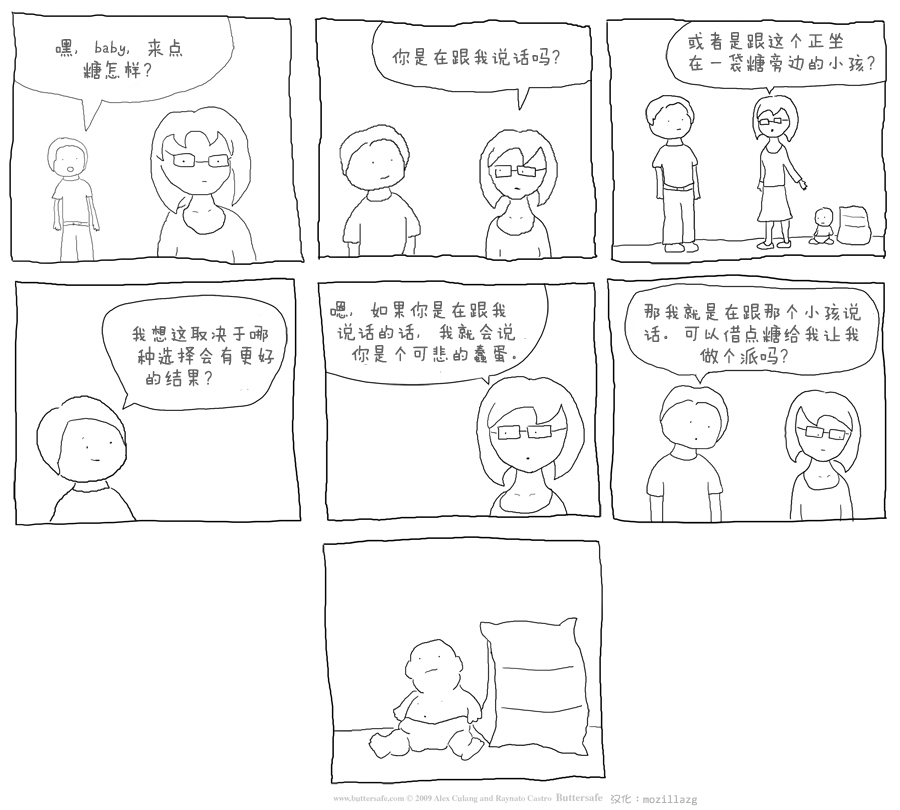
<style>
.page{position:relative;width:900px;height:810px;background:#ffffff}
.page>*{position:absolute;margin:0}
.t1{font:20px/22px "FZMWJW--GB1-0";color:#646464}
.t2{font:20px "FZMWJW--GB1-0";color:#646464}
.t3{font:11px "YaHei-Consolas-Hybrid";color:#b6b4b4}
.t4{font:11px "DFGirl";color:#b6b4b4}
</style>
<div class="page">
<p class="t1" style="left:55px;top:38px;width:128px;height:41px">嘿，baby，来点<br>    糖怎样？</p>
<p class="t1" style="left:688px;top:31px;width:187px;height:42px">或者是跟这个正坐<br>在一袋糖旁边的小孩？</p>
<p class="t2" style="left:392px;top:48px;width:168px;height:18px">你是在跟我说话吗？</p>
<p class="t1" style="left:330px;top:301px;width:186px;height:63px">嗯，如果你是在跟我<br> 说话的话，我就会说<br>   你是个可悲的蠢蛋。</p>
<p class="t1" style="left:644px;top:303px;width:217px;height:62px">那我就是在跟那个小孩说<br>话。可以借点糖给我让我<br>        做个派吗？</p>
<p class="t1" style="left:132px;top:325px;width:142px;height:62px">我想这取决于哪<br> 种选择会有更好<br>  的结果？</p>
<p class="t3" style="left:610px;top:794px;width:87px;height:12px"><span class="t4">汉化：</span>mozillazg</p>
</div>
